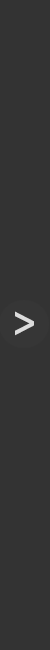
<style>
.page{position:relative;width:50px;height:650px;background:#333333}
.page>*{position:absolute;margin:0}
.t1{font:48px "ArialNarrow";color:#dcdcdc}
</style>
<div class="page">
<p class="t1" style="left:15px;top:311px;width:19px;height:25px">&gt;</p>
</div>
